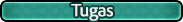
<style>
.page{position:relative;width:183px;height:22px}
.page>*{position:absolute;margin:0}
.t1{font:18px "AdobeClean-Regular";letter-spacing:-0.04em;color:#edeff1;font-weight:bold}
</style>
<div class="page">
<p class="t1" style="left:71px;top:4px;width:42px;height:17px">Tugas</p>
</div>
